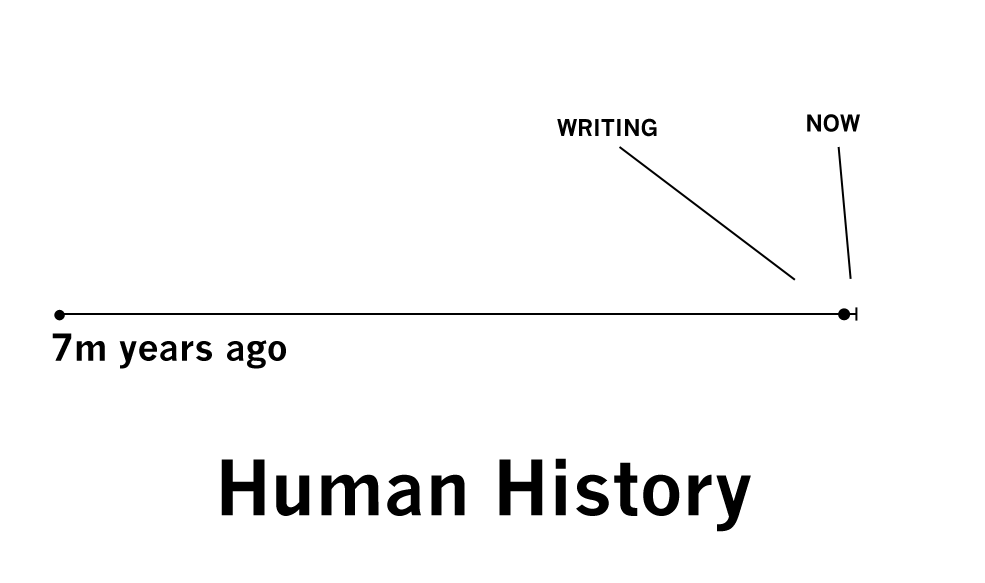
<style>
.page{position:relative;width:985px;height:583px;background:#ffffff}
.page>*{position:absolute;margin:0}
.t1{font:32.5px "NewsGothicMT-Bold";color:#000000;font-variant:small-caps}
.t2{font:36.5px "NewsGothicMT-Bold";color:#000000}
.t3{font:74.5px "NewsGothicMT-Bold";color:#000000}
</style>
<div class="page">
<p class="t1" style="left:557px;top:118px;width:100px;height:19px">writing</p>
<p class="t1" style="left:807px;top:114px;width:53px;height:18px">now</p>
<p class="t2" style="left:52px;top:333px;width:234px;height:36px">7m years ago</p>
<p class="t3" style="left:221px;top:458px;width:530px;height:74px">Human History</p>
</div>
